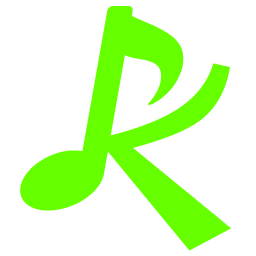
<style>
.page{position:relative;width:256px;height:256px;background:#ffffff}
.page>*{position:absolute;margin:0}
.t1{font:212.9px "Jokerman-Regular";color:#66ff00;scale:1.35 1}
</style>
<div class="page">
<p class="t1" style="left:60px;top:63px;width:187px;height:188px">K</p>
</div>
